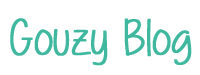
<style>
.page{position:relative;width:200px;height:75px;background:#ffffff}
.page>*{position:absolute;margin:0}
.t1{font:50px "Alittlesunshine";color:#3fb89f;font-weight:bold}
</style>
<div class="page">
<p class="t1" style="left:10px;top:18px;width:182px;height:48px">Gouzy Blog</p>
</div>
